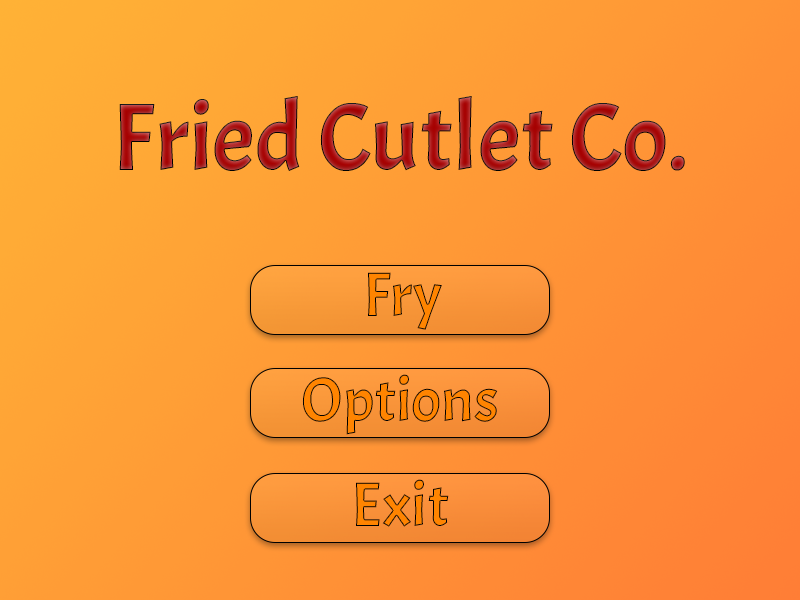
<style>
.page{position:relative;width:800px;height:600px}
.page>*{position:absolute;margin:0}
.t1{font:95.8px "Acme-Regular"}
.t2{font:62.5px "Acme-Regular"}
</style>
<div class="page">
<p class="t1" style="left:119px;top:96px;width:566px;height:75px">Fried Cutlet Co.</p>
<p class="t2" style="left:368px;top:272px;width:74px;height:58px">Fry</p>
<p class="t2" style="left:302px;top:374px;width:196px;height:61px">Options</p>
<p class="t2" style="left:356px;top:479px;width:93px;height:48px">Exit</p>
</div>
